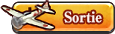
<style>
.page{position:relative;width:115px;height:34px}
.page>*{position:absolute;margin:0}
.t1{font:14px "RyuminPro-ExBold";color:#fff4ee;font-weight:bold;scale:0.9 1}
</style>
<div class="page">
<p class="t1" style="left:64px;top:11px;width:38px;height:12px">Sortie</p>
</div>
